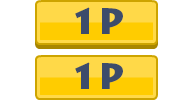
<style>
.page{position:relative;width:190px;height:100px;background:#ffffff}
.page>*{position:absolute;margin:0}
.t1{font:36px "LithosPro-Black";color:#3d4c6b}
</style>
<div class="page">
<p class="t1" style="left:75px;top:7px;width:48px;height:27px">1P</p>
<p class="t1" style="left:75px;top:62px;width:48px;height:27px">1P</p>
</div>
